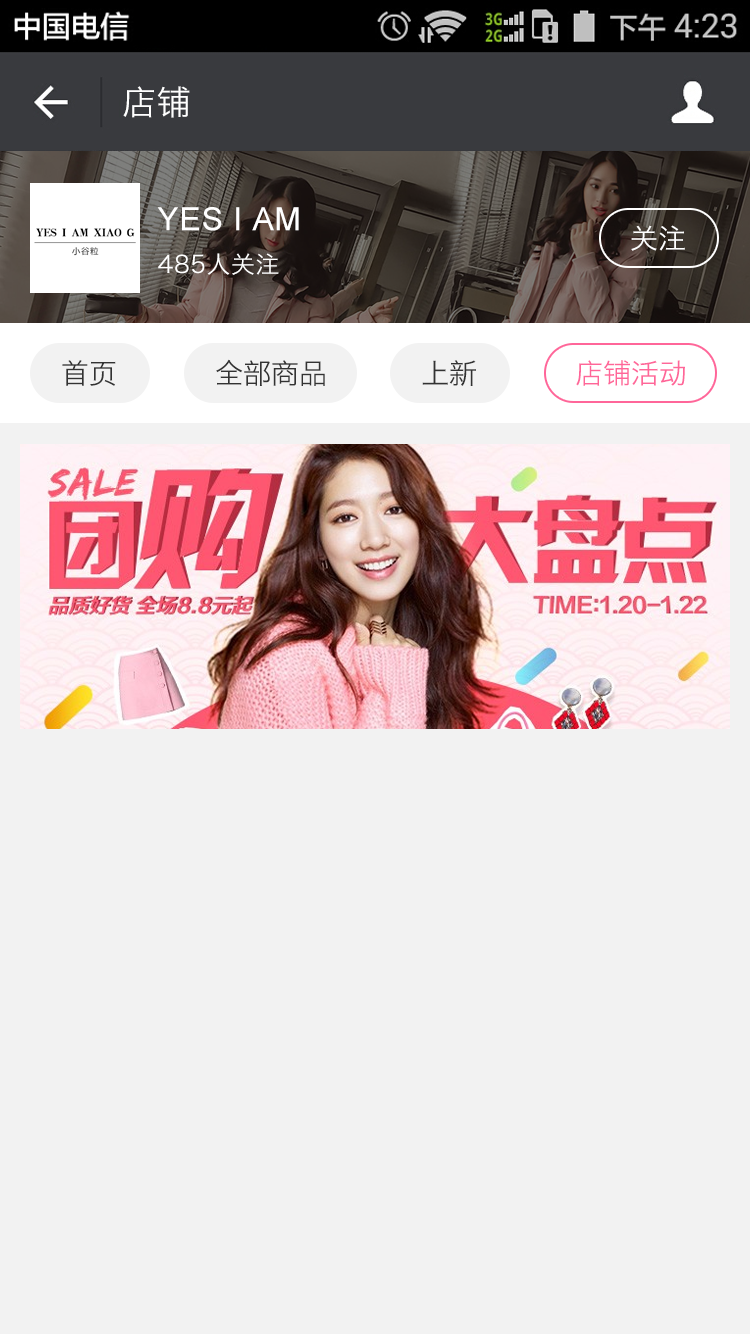
<style>
.page{position:relative;width:750px;height:1334px;background:#f2f2f2}
.page>*{position:absolute;margin:0}
.t1{font:34px "HiraginoSansGB-W3";letter-spacing:0.022em;color:#ffffff}
.t2{font:32px "ArialMT";letter-spacing:0.022em;color:#ffffff}
.t3{font:28px "HiraginoSansGB-W3";color:#ffffff}
.t4{font:24px "HiraginoSansGB-W3";letter-spacing:0.022em;color:#ffffff}
.t5{font:28px "HiraginoSansGB-W3";color:#333333}
.t6{font:28px "HiraginoSansGB-W3";color:#ff6699}
</style>
<div class="page">
<p class="t1" style="left:123px;top:86px;width:67px;height:32px">店铺</p>
<p class="t2" style="left:157px;top:207px;width:142px;height:24px">YES I AM</p>
<p class="t3" style="left:631px;top:225px;width:54px;height:26px">关注</p>
<p class="t4" style="left:158px;top:253px;width:121px;height:22px">485人关注</p>
<p class="t5" style="left:62px;top:360px;width:54px;height:26px">首页</p>
<p class="t5" style="left:216px;top:359px;width:109px;height:27px">全部商品</p>
<p class="t5" style="left:422px;top:360px;width:54px;height:26px">上新</p>
<p class="t6" style="left:576px;top:360px;width:109px;height:26px">店铺活动</p>
</div>
